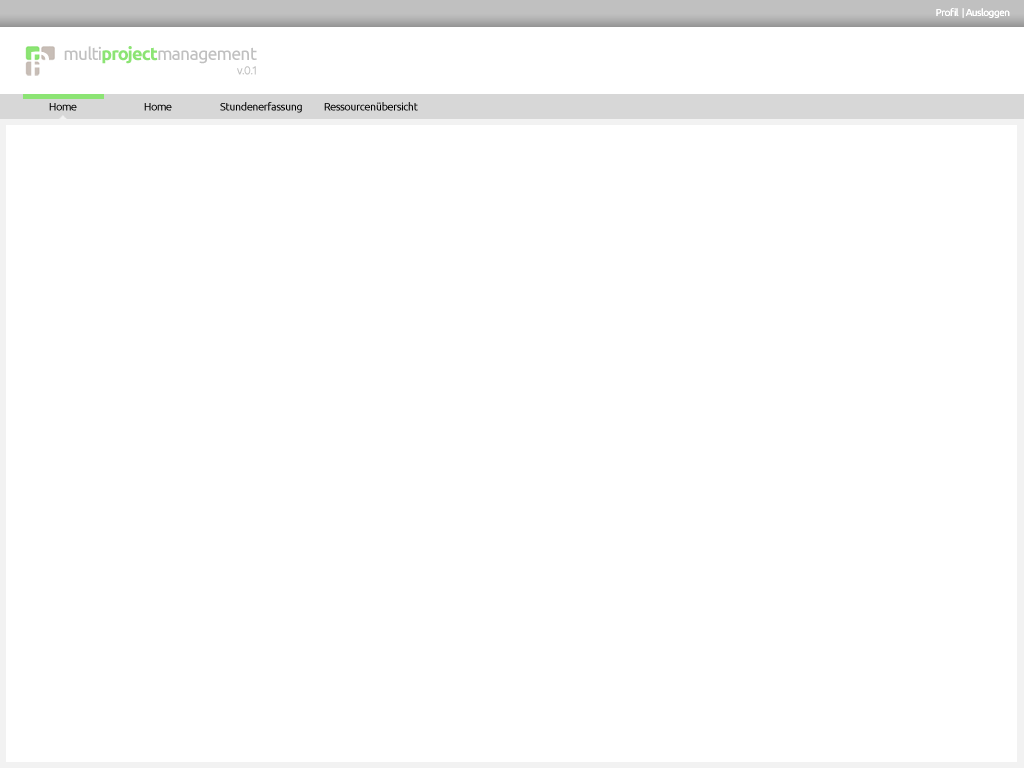
<style>
.page{position:relative;width:1024px;height:768px;background:#ffffff}
.page>*{position:absolute;margin:0}
.t1{font:10px "Ubuntu";letter-spacing:-0.05em;color:#ffffff}
.t2{font:36px "Ubuntu";letter-spacing:-0.05em;color:#ffffff}
.t3{font:18px "Ubuntu";letter-spacing:-0.05em;color:#c0c0c0}
.t4{font:18px "Ubuntu-Bold";letter-spacing:-0.05em;color:#8ce474}
.t5{font:12px "Ubuntu";letter-spacing:-0.05em;color:#c0c0c0}
.t6{font:11px "Ubuntu";letter-spacing:-0.05em;color:#000000}
</style>
<div class="page">
<p class="t1" style="left:936px;top:8px;width:74px;height:10px">Profil  | Ausloggen</p>
<p class="t2" style="left:31px;top:51px;width:18px;height:26px">P</p>
<p class="t3" style="left:64px;top:46px;width:193px;height:29px;text-align:right">multi<span class="t4">project</span>management<br><span class="t5">v.0.1</span></p>
<p class="t6" style="left:220px;top:102px;width:82px;height:11px">Stundenerfassung</p>
<p class="t6" style="left:324px;top:102px;width:94px;height:9px">Ressourcenübersicht</p>
<p class="t6" style="left:49px;top:103px;width:28px;height:8px">Home</p>
<p class="t6" style="left:144px;top:103px;width:28px;height:8px">Home</p>
</div>
